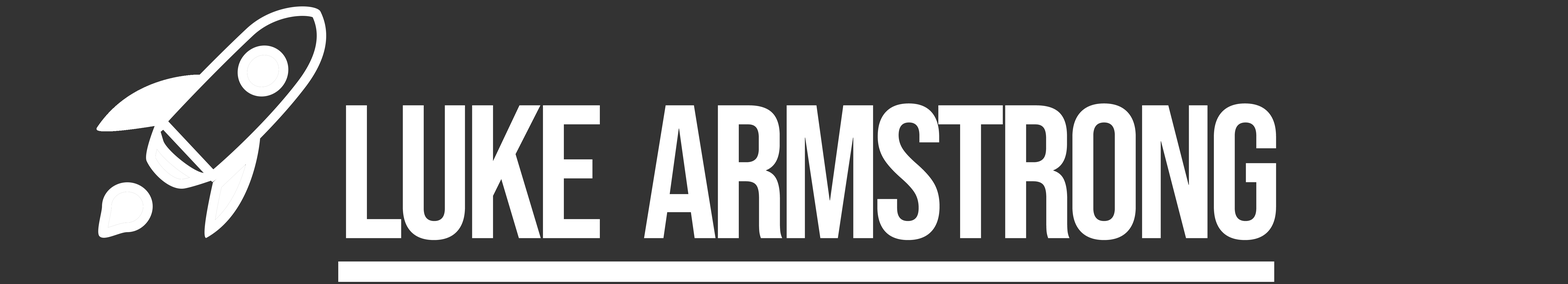
<style>
.page{position:relative;width:1568px;height:284px;background:#333333}
.page>*{position:absolute;margin:0}
.t1{font:189.4px "BebasNeue-Regular";letter-spacing:-0.04em;color:#ffffff}
</style>
<div class="page">
<p class="t1" style="left:346px;top:103px;width:930px;height:137px">LUKE  ARMSTRONG</p>
</div>
